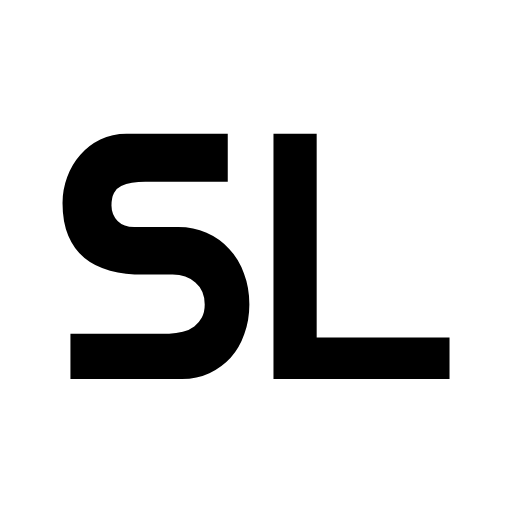
<style>
.page{position:relative;width:512px;height:512px;background:#ffffff}
.page>*{position:absolute;margin:0}
.t1{font:360px "DoHyeon-Regular";color:#000000}
</style>
<div class="page">
<p class="t1" style="left:62px;top:133px;width:388px;height:246px">SL</p>
</div>
